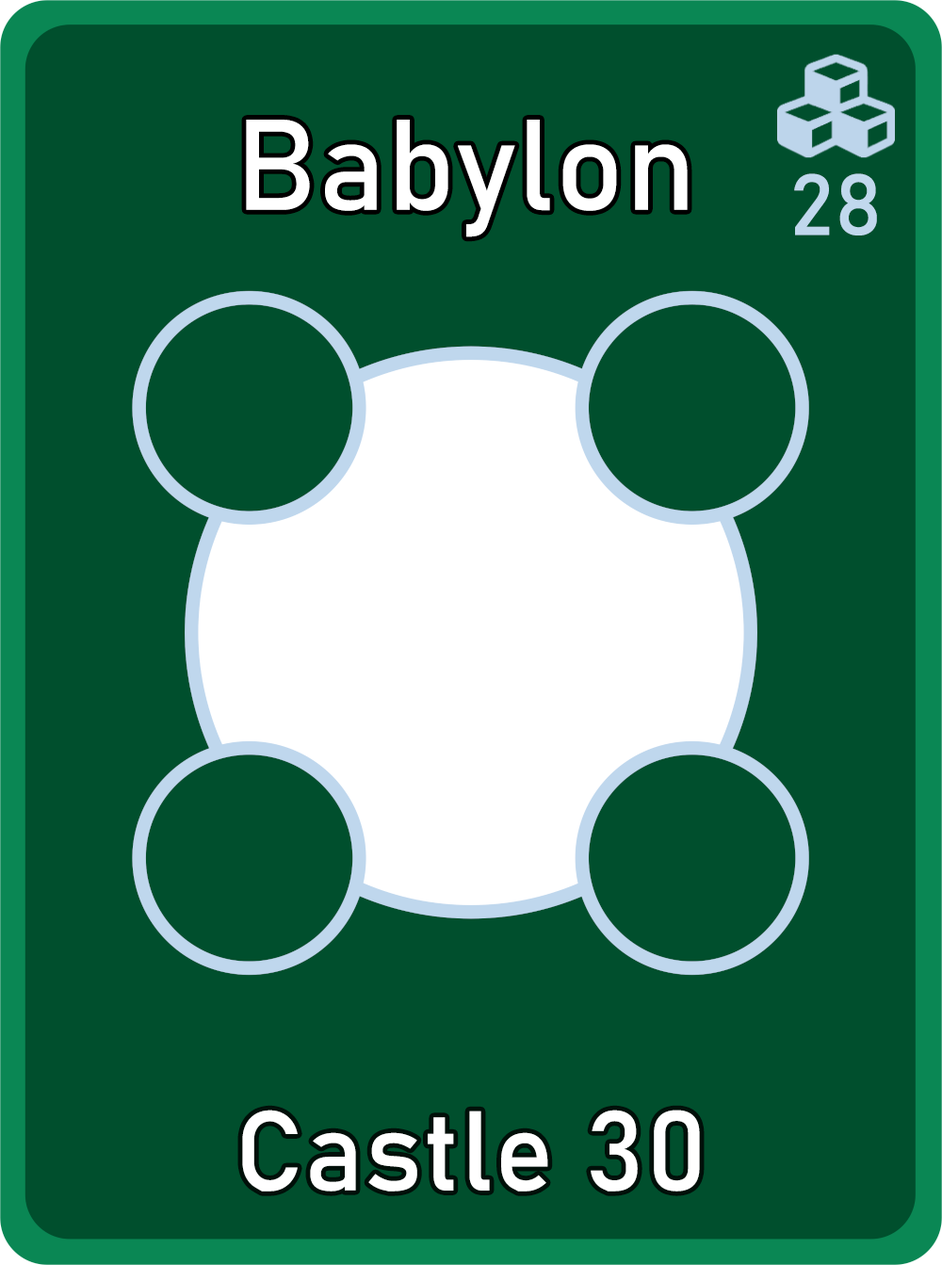
<style>
.page{position:relative;width:942px;height:1265px;background:#004f2d}
.page>*{position:absolute;margin:0}
.t1{font:126.7px "Bahnschrift";letter-spacing:0.01em;color:#ffffff}
.t2{font:85px "Bahnschrift";letter-spacing:0.01em;color:#c1d8ed}
.t3{font:111.3px "Bahnschrift";letter-spacing:0.01em;color:#ffffff}
</style>
<div class="page">
<p class="t1" style="left:246px;top:120px;width:442px;height:117px">Babylon</p>
<p class="t2" style="left:794px;top:173px;width:83px;height:63px">28</p>
<p class="t3" style="left:242px;top:1110px;width:458px;height:82px">Castle 30</p>
</div>
